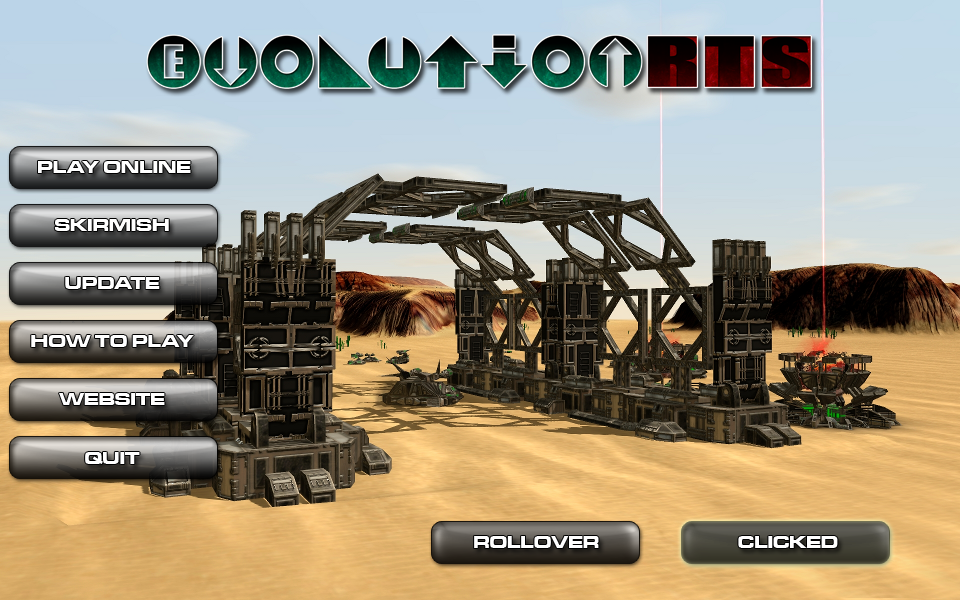
<style>
.page{position:relative;width:960px;height:600px}
.page>*{position:absolute;margin:0}
.t1{font:18px "MicrogrammaD-BoldExte";color:#ffffff}
</style>
<div class="page">
<p class="t1" style="left:38px;top:161px;width:153px;height:12px">PLAY ONLINE</p>
<p class="t1" style="left:54px;top:219px;width:115px;height:12px">SKIRMISH</p>
<p class="t1" style="left:65px;top:277px;width:95px;height:12px">UPDATE</p>
<p class="t1" style="left:31px;top:335px;width:163px;height:12px">HOW TO PLAY</p>
<p class="t1" style="left:59px;top:393px;width:106px;height:12px">WEBSITE</p>
<p class="t1" style="left:85px;top:452px;width:55px;height:12px">QUIT</p>
<p class="t1" style="left:474px;top:536px;width:125px;height:12px">ROLLOVER</p>
<p class="t1" style="left:738px;top:536px;width:100px;height:12px">CLICKED</p>
</div>
